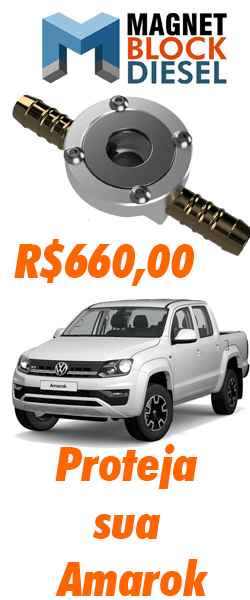
<style>
.page{position:relative;width:250px;height:600px;background:#ffffff}
.page>*{position:absolute;margin:0}
.t1{font:48px "FuturaBT-ExtraBlackCondItalic";color:#ff6600}
</style>
<div class="page">
<p class="t1" style="left:14px;top:239px;width:181px;height:47px">R$660,00</p>
<p class="t1" style="left:55px;top:444px;width:154px;height:152px;text-align:center">Proteja <br>sua <br>Amarok</p>
</div>
